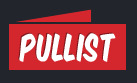
<style>
.page{position:relative;width:137px;height:83px;background:#23252c}
.page>*{position:absolute;margin:0}
.t1{font:35.7px "KomikaTitle";color:#ffffff}
</style>
<div class="page">
<p class="t1" style="left:19px;top:33px;width:97px;height:29px">PULLIST</p>
</div>
